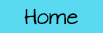
<style>
.page{position:relative;width:103px;height:33px;background:#59daf0}
.page>*{position:absolute;margin:0}
.t1{font:18px "ArchitectsDaughter";color:#020202}
</style>
<div class="page">
<p class="t1" style="left:24px;top:8px;width:54px;height:17px">Home</p>
</div>
